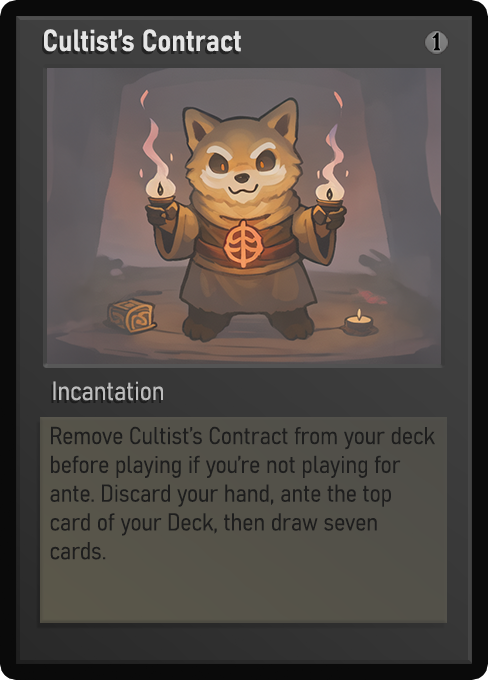
<style>
.page{position:relative;width:488px;height:680px}
.page>*{position:absolute;margin:0}
.t1{font:30px "Bahnschrift-SemiBoldSemiCondensed";color:#f2f2f2;font-weight:bold}
.t2{font:25px "WTRRoycroft";color:#000000;font-weight:bold;scale:1.09 1}
.t3{font:26px "Bahnschrift-LightSemiCondensed";color:#c8c8c8;font-weight:bold}
.t4{font:24px "Bahnschrift-LightSemiCondensed";color:#1e1e1e;font-weight:bold}
</style>
<div class="page">
<p class="t1" style="left:44px;top:29px;width:197px;height:23px;opacity:0.9">Cultist’s Contract</p>
<p class="t2" style="left:432px;top:32px;width:9px;height:19px">1</p>
<p class="t3" style="left:53px;top:381px;width:110px;height:20px;opacity:0.9">Incantation</p>
<p class="t4" style="left:50px;top:426px;width:385px;height:134px">Remove Cultist’s Contract from your deck before playing if you’re not playing for ante. Discard your hand, ante the top card of your Deck, then draw seven cards.</p>
</div>
